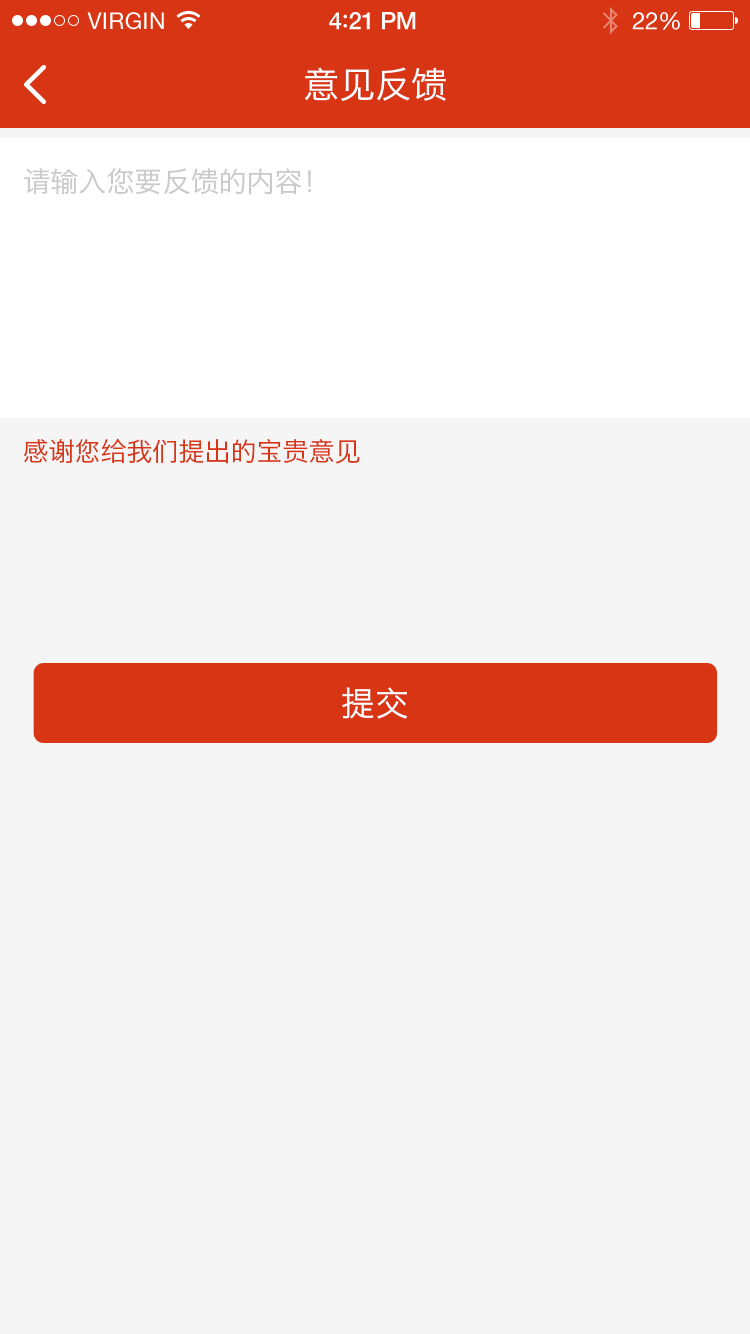
<style>
.page{position:relative;width:750px;height:1334px;background:#f5f5f5}
.page>*{position:absolute;margin:0}
.t1{font:23px "HelveticaNeue";letter-spacing:0.02em;color:#ffffff}
.t2{font:24px "HelveticaNeue-Medium";letter-spacing:-0.02em;color:#ffffff}
.t3{font:26px "Avenir-Medium";letter-spacing:-0.02em;color:#ffffff}
.t4{font:24px "HelveticaNeue";letter-spacing:-0.02em;color:#ffffff}
.t5{font:36px "HiraginoSansGB-W3";color:#ffffff}
.t6{font:28px "HiraginoSansGB-W3";color:#cacaca}
.t7{font:26px "HiraginoSansGB-W3";color:#d83515}
.t8{font:34px "HiraginoSansGB-W3";color:#ffffff}
</style>
<div class="page">
<p class="t1" style="left:87px;top:12px;width:77px;height:18px">VIRGIN</p>
<p class="t2" style="left:329px;top:12px;width:87px;height:18px">4<span class="t3">:</span>21 PM</p>
<p class="t4" style="left:632px;top:12px;width:48px;height:18px">22%</p>
<p class="t5" style="left:305px;top:67px;width:141px;height:34px">意见反馈</p>
<p class="t6" style="left:24px;top:168px;width:287px;height:27px">请输入您要反馈的内容！</p>
<p class="t7" style="left:24px;top:438px;width:336px;height:26px">感谢您给我们提出的宝贵意见</p>
<p class="t8" style="left:342px;top:687px;width:66px;height:32px">提交</p>
</div>
